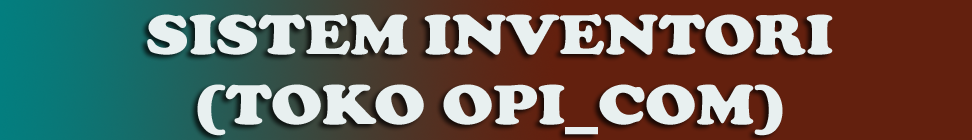
<style>
.page{position:relative;width:972px;height:140px;background:#63200e}
.page>*{position:absolute;margin:0}
.t1{font:58.3px "CooperBlack";color:#e8f0f0;scale:1.13 1}
</style>
<div class="page">
<p class="t1" style="left:147px;top:14px;width:686px;height:122px;text-align:center">SISTEM INVENTORI<br>(TOKO OPI_COM)</p>
</div>
